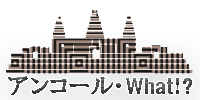
<style>
.page{position:relative;width:200px;height:100px;background:#ffffff}
.page>*{position:absolute;margin:0}
.t1{font:24px "HGPSoeiPresenceEB"}
.t2{font:24px "FranklinGothic-DemiCond"}
</style>
<div class="page">
<p class="t1" style="left:8px;top:76px;width:184px;height:19px">アンコール・<span class="t2">What!?</span></p>
</div>
